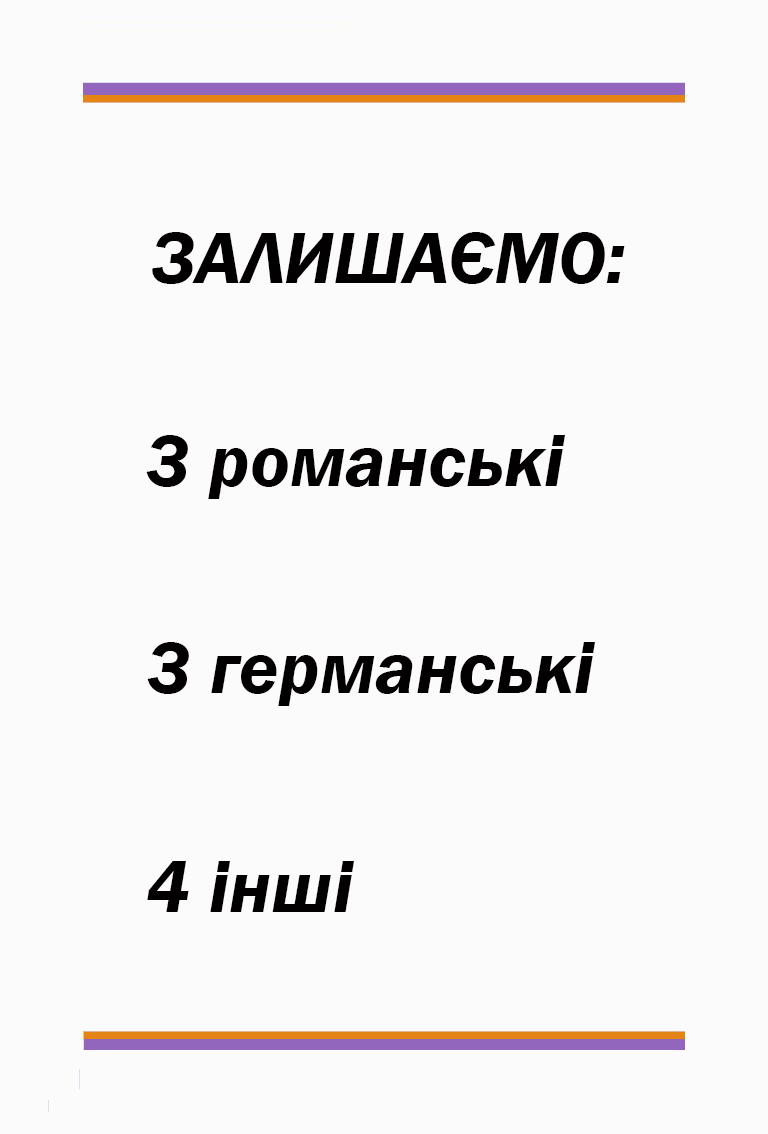
<style>
.page{position:relative;width:768px;height:1134px;background:#fbfbfb}
.page>*{position:absolute;margin:0}
.t1{font:75px "FranklinGothic-DemiItalic";color:#020000}
</style>
<div class="page">
<p class="t1" style="left:152px;top:232px;width:473px;height:52px">ЗАЛИШАЄМО:</p>
<p class="t1" style="left:146px;top:435px;width:419px;height:64px">3 романські</p>
<p class="t1" style="left:147px;top:642px;width:448px;height:64px">3 германські</p>
<p class="t1" style="left:147px;top:861px;width:207px;height:51px">4 інші</p>
</div>
